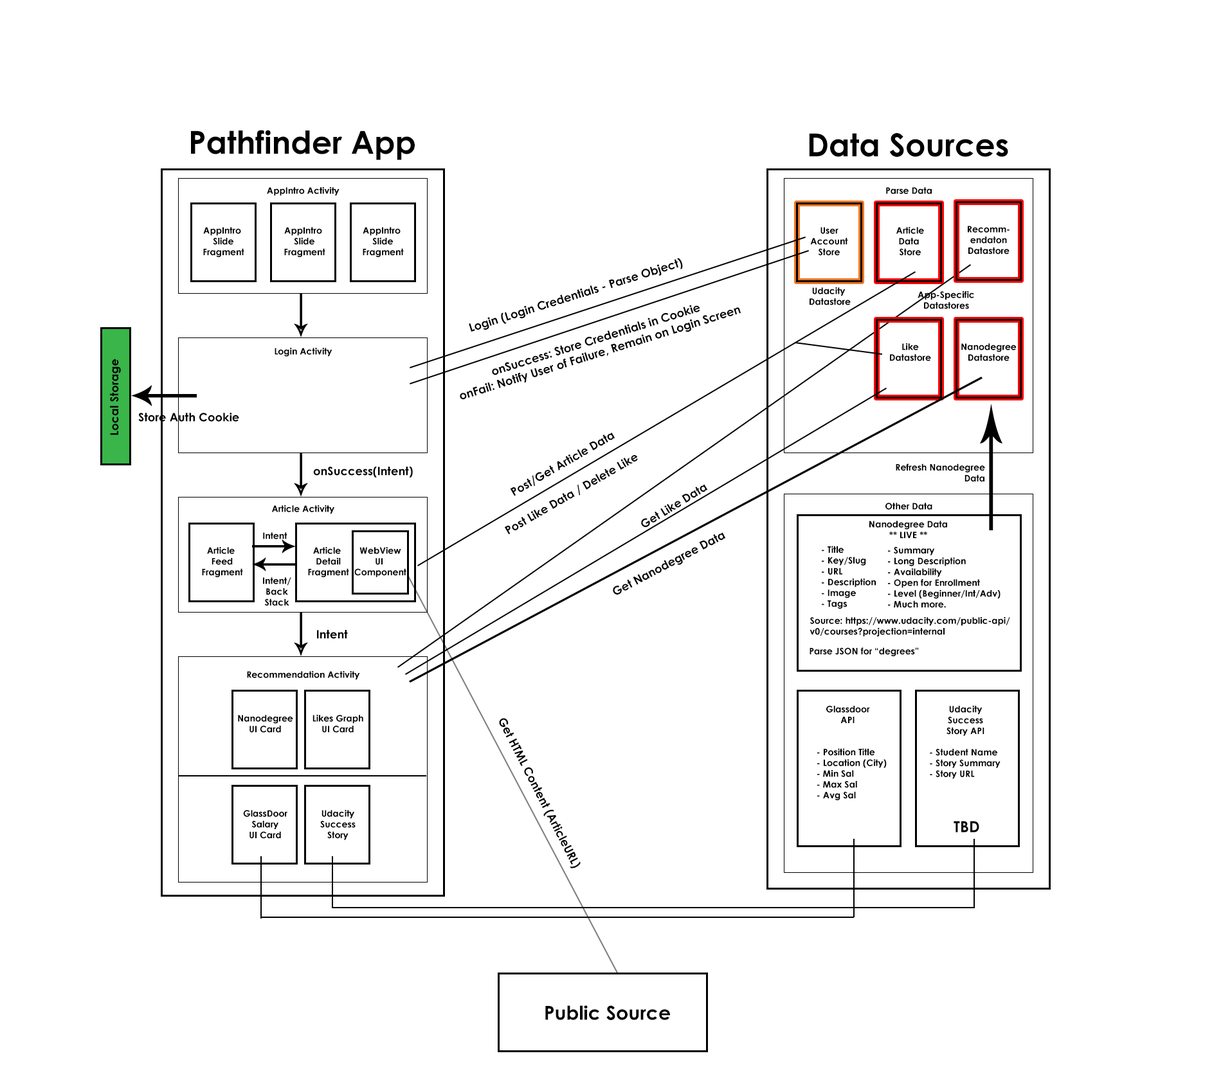
<style>
.page{position:relative;width:1214px;height:1085px;background:#ffffff}
.page>*{position:absolute;margin:0}
.t1{font:31.6px "CenturyGothic-Bold";color:#000000}
.t2{font:9px "CenturyGothic-Bold";color:#000000}
.t3{font:11.6px "CenturyGothic-Bold";color:#000000}
.t4{font:11.3px "CenturyGothic-Bold";color:#000000}
.t5{font:15.4px "CenturyGothic-Bold";color:#000000}
.t6{font:19.3px "CenturyGothic-Bold";color:#000000}
</style>
<div class="page">
<p class="t1" style="left:191px;top:130px;width:224px;height:30px">Pathfinder App</p>
<p class="t1" style="left:809px;top:133px;width:199px;height:24px">Data Sources</p>
<p class="t2" style="left:267px;top:187px;width:72px;height:9px">AppIntro Activity</p>
<p class="t2" style="left:886px;top:187px;width:46px;height:7px">Parse Data</p>
<p class="t2" style="left:203px;top:227px;width:41px;height:30px;text-align:center">AppIntro <br>Slide<br>Fragment</p>
<p class="t2" style="left:284px;top:227px;width:41px;height:30px;text-align:center">AppIntro <br>Slide<br>Fragment</p>
<p class="t2" style="left:363px;top:227px;width:41px;height:30px;text-align:center">AppIntro <br>Slide<br>Fragment</p>
<p class="t2" style="left:810px;top:227px;width:38px;height:29px;text-align:center">User<br>Account<br>Store</p>
<p class="t2" style="left:896px;top:227px;width:28px;height:29px;text-align:center">Article<br>Data <br>Store</p>
<p class="t2" style="left:968px;top:226px;width:41px;height:29px;text-align:center">Recomm-<br>endaton<br>Datastore</p>
<p class="t3" style="left:469px;top:258px;width:214px;height:74px;rotate:-17deg">Login (Login Credentials - Parse Object)</p>
<p class="t2" style="left:809px;top:287px;width:42px;height:18px;text-align:center">Udacity <br>Datastore</p>
<p class="t2" style="left:917px;top:291px;width:57px;height:18px;text-align:center">App-Specific<br>Datastores</p>
<p class="t3" style="left:460px;top:305px;width:281px;height:95px;text-align:center;rotate:-17deg">onSuccess: Store Credentials in Cookie<br>onFail: Notify User of Failure, Remain on Login Screen</p>
<p class="t2" style="left:274px;top:348px;width:58px;height:9px">Login Activity</p>
<p class="t2" style="left:890px;top:343px;width:41px;height:18px;text-align:center">Like<br>Datastore</p>
<p class="t2" style="left:961px;top:343px;width:55px;height:18px;text-align:center">Nanodegree<br>Datastore</p>
<p class="t4" style="left:110px;top:359px;width:11px;height:76px;rotate:-90deg">Local Storage</p>
<p class="t3" style="left:138px;top:413px;width:101px;height:9px">Store Auth Cookie</p>
<p class="t3" style="left:510px;top:433px;width:105px;height:63px;rotate:-30deg">Post/Get Article Data</p>
<p class="t3" style="left:504px;top:455px;width:134px;height:80px;rotate:-30deg">Post Like Data / Delete Like</p>
<p class="t3" style="left:313px;top:467px;width:100px;height:11px">onSuccess(Intent)</p>
<p class="t2" style="left:896px;top:464px;width:89px;height:18px;text-align:right">Refresh Nanodegree<br>Data</p>
<p class="t3" style="left:641px;top:484px;width:67px;height:43px;rotate:-31deg">Get Like Data</p>
<p class="t2" style="left:272px;top:505px;width:62px;height:9px">Article Activity</p>
<p class="t2" style="left:885px;top:503px;width:47px;height:7px">Other Data</p>
<p class="t2" style="left:869px;top:521px;width:78px;height:18px;text-align:center">Nanodegree Data<br>** LIVE **</p>
<p class="t2" style="left:263px;top:532px;width:24px;height:7px">Intent</p>
<p class="t3" style="left:613px;top:532px;width:113px;height:63px;rotate:-28deg">Get Nanodegree Data</p>
<p class="t2" style="left:822px;top:546px;width:54px;height:63px">- Title<br>- Key/Slug<br>- URL<br>- Description<br>- Image<br>- Tags</p>
<p class="t2" style="left:202px;top:547px;width:41px;height:30px;text-align:center">Article <br>Feed<br>Fragment</p>
<p class="t2" style="left:308px;top:547px;width:41px;height:30px;text-align:center">Article <br>Detail<br>Fragment</p>
<p class="t2" style="left:354px;top:547px;width:52px;height:30px;text-align:center">WebView<br>UI <br>Component</p>
<p class="t2" style="left:888px;top:546px;width:112px;height:62px">- Summary<br>- Long Description<br>- Availability<br>- Open for Enrollment<br>- Level (Beginner/Int/Adv)<br>- Much more.</p>
<p class="t2" style="left:263px;top:577px;width:28px;height:29px;text-align:center">Intent/<br>Back<br>Stack</p>
<p class="t2" style="left:809px;top:617px;width:201px;height:20px">Source: https://www.udacity.com/public-api/<br>v0/courses?projection=internal</p>
<p class="t3" style="left:317px;top:630px;width:31px;height:9px">Intent</p>
<p class="t2" style="left:809px;top:647px;width:110px;height:9px">Parse JSON for “degrees”</p>
<p class="t2" style="left:247px;top:671px;width:113px;height:9px">Recommendation Activity</p>
<p class="t2" style="left:826px;top:706px;width:44px;height:17px;text-align:center">Glassdoor<br>API</p>
<p class="t2" style="left:946px;top:705px;width:38px;height:31px;text-align:center">Udacity<br>Success<br>Story API</p>
<p class="t2" style="left:238px;top:715px;width:55px;height:18px;text-align:center">Nanodegree<br>UI Card</p>
<p class="t2" style="left:312px;top:715px;width:51px;height:18px;text-align:center">Likes Graph<br>UI Card</p>
<p class="t3" style="left:499px;top:718px;width:81px;height:151px;rotate:63deg">Get HTML Content (ArticleURL)</p>
<p class="t2" style="left:817px;top:748px;width:70px;height:52px">- Position Title<br>- Location (City)<br>- Min Sal<br>- Max Sal<br>- Avg Sal</p>
<p class="t2" style="left:930px;top:749px;width:70px;height:30px">- Student Name<br>- Story Summary<br>- Story URL</p>
<p class="t2" style="left:243px;top:810px;width:44px;height:29px;text-align:center">GlassDoor<br>Salary<br>UI Card</p>
<p class="t2" style="left:320px;top:810px;width:36px;height:30px;text-align:center">Udacity<br>Success<br>Story</p>
<p class="t5" style="left:953px;top:821px;width:26px;height:12px">TBD</p>
<p class="t6" style="left:545px;top:1005px;width:125px;height:15px">Public Source</p>
</div>
